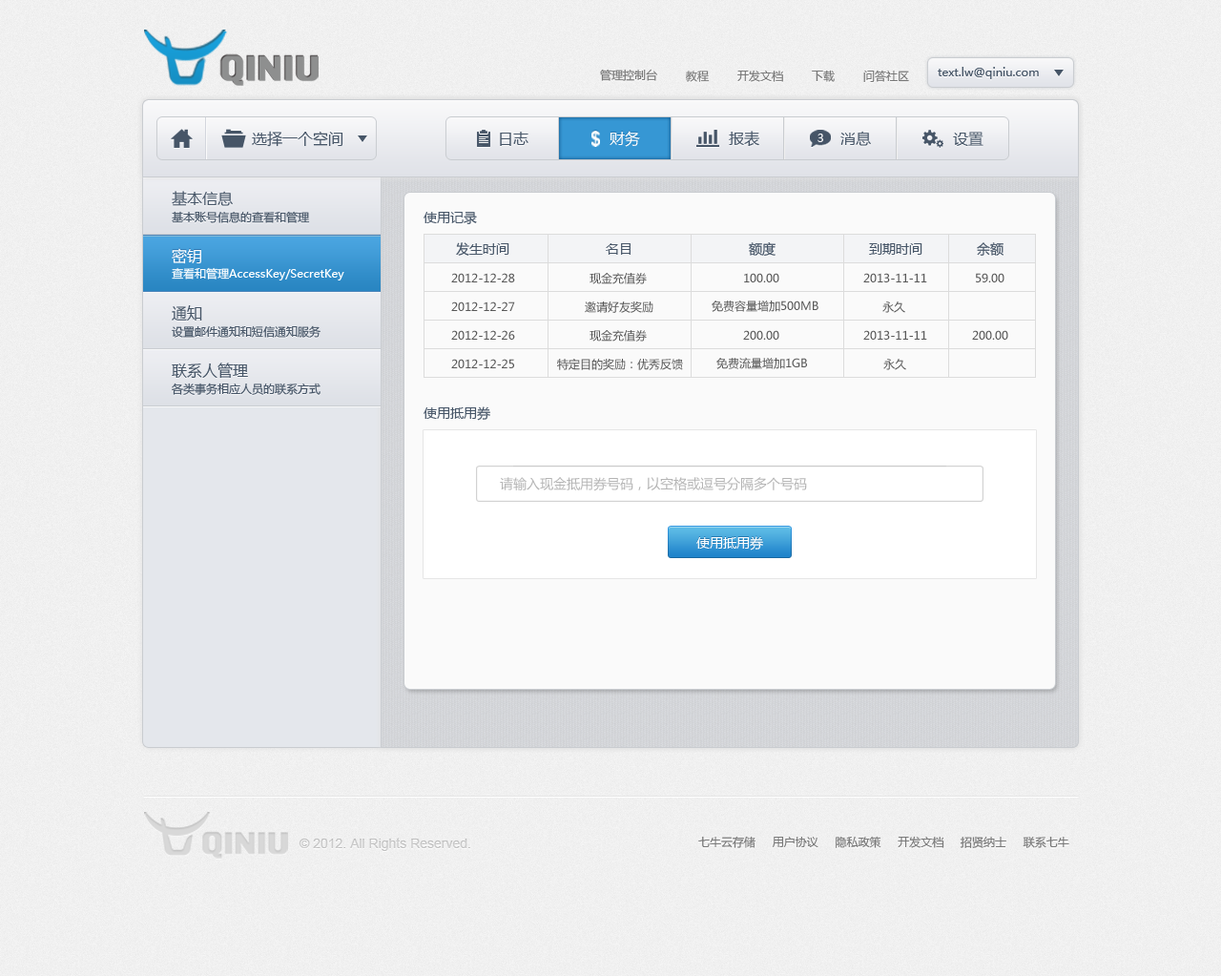
<style>
.page{position:relative;width:1221px;height:976px}
.page>*{position:absolute;margin:0}
.t1{font:11.5px "MicrosoftYaHei";color:#787878}
.t2{font:11.5px "MicrosoftYaHei";color:#465567}
.t3{font:15.3px "MicrosoftYaHei";color:#465567}
.t4{font:15.3px "MicrosoftYaHei";color:#ffffff}
.t5{font:11.5px "MicrosoftYaHei";color:#f8f8f9}
.t6{font:13.4px "MicrosoftYaHei";color:#465567}
.t7{font:11.5px "MicrosoftYaHei";color:#ffffff}
.t8{font:11.5px "MicrosoftYaHei";color:#585858}
.t9{font:13.4px "MicrosoftYaHei";color:#b4b4b4}
.t10{font:13.4px "MicrosoftYaHei";color:#ffffff}
.t11{font:13.4px "ArialMT";color:#c6c6c6}
</style>
<div class="page">
<p class="t1" style="left:600px;top:69px;width:57px;height:12px">管理控制台</p>
<p class="t1" style="left:686px;top:71px;width:24px;height:11px">教程</p>
<p class="t1" style="left:738px;top:70px;width:45px;height:12px">开发文档</p>
<p class="t1" style="left:812px;top:70px;width:23px;height:12px">下载</p>
<p class="t1" style="left:864px;top:70px;width:45px;height:12px">问答社区</p>
<p class="t2" style="left:938px;top:67px;width:101px;height:12px">text.lw@qiniu.com</p>
<p class="t3" style="left:252px;top:131px;width:92px;height:16px">选择一个空间</p>
<p class="t3" style="left:500px;top:132px;width:29px;height:14px">日志</p>
<p class="t4" style="left:610px;top:131px;width:30px;height:16px">财务</p>
<p class="t3" style="left:729px;top:131px;width:31px;height:16px">报表</p>
<p class="t5" style="left:818px;top:134px;width:6px;height:8px">3</p>
<p class="t3" style="left:841px;top:131px;width:30px;height:15px">消息</p>
<p class="t3" style="left:953px;top:132px;width:31px;height:14px">设置</p>
<p class="t3" style="left:172px;top:191px;width:61px;height:15px">基本信息</p>
<p class="t2" style="left:172px;top:211px;width:138px;height:12px">基本账号信息的查看和管理</p>
<p class="t6" style="left:424px;top:212px;width:53px;height:12px">使用记录</p>
<p class="t6" style="left:456px;top:242px;width:54px;height:14px">发生时间</p>
<p class="t6" style="left:606px;top:243px;width:25px;height:12px">名目</p>
<p class="t6" style="left:749px;top:242px;width:27px;height:15px">额度</p>
<p class="t6" style="left:869px;top:243px;width:54px;height:12px">到期时间</p>
<p class="t6" style="left:977px;top:242px;width:27px;height:14px">余额</p>
<p class="t4" style="left:172px;top:248px;width:29px;height:16px">密钥</p>
<p class="t7" style="left:172px;top:267px;width:172px;height:14px">查看和管理AccessKey/SecretKey</p>
<p class="t8" style="left:451px;top:273px;width:64px;height:9px">2012-12-28</p>
<p class="t8" style="left:590px;top:273px;width:57px;height:11px">现金充值券</p>
<p class="t8" style="left:744px;top:273px;width:36px;height:9px">100.00</p>
<p class="t8" style="left:864px;top:273px;width:64px;height:9px">2013-11-11</p>
<p class="t8" style="left:976px;top:273px;width:29px;height:9px">59.00</p>
<p class="t3" style="left:172px;top:305px;width:30px;height:16px">通知</p>
<p class="t8" style="left:451px;top:302px;width:64px;height:9px">2012-12-27</p>
<p class="t8" style="left:585px;top:302px;width:69px;height:11px">邀请好友奖励</p>
<p class="t8" style="left:712px;top:301px;width:107px;height:11px">免费容量增加500MB</p>
<p class="t8" style="left:883px;top:302px;width:23px;height:11px">永久</p>
<p class="t2" style="left:172px;top:325px;width:149px;height:13px">设置邮件通知和短信通知服务</p>
<p class="t8" style="left:451px;top:330px;width:64px;height:10px">2012-12-26</p>
<p class="t8" style="left:590px;top:330px;width:57px;height:12px">现金充值券</p>
<p class="t8" style="left:743px;top:330px;width:37px;height:10px">200.00</p>
<p class="t8" style="left:864px;top:330px;width:64px;height:10px">2013-11-11</p>
<p class="t8" style="left:972px;top:330px;width:37px;height:10px">200.00</p>
<p class="t3" style="left:172px;top:363px;width:76px;height:16px">联系人管理</p>
<p class="t8" style="left:451px;top:359px;width:63px;height:9px">2012-12-25</p>
<p class="t8" style="left:557px;top:359px;width:126px;height:11px">特定目的奖励：优秀反馈</p>
<p class="t8" style="left:717px;top:357px;width:90px;height:12px">免费流量增加1GB</p>
<p class="t8" style="left:884px;top:359px;width:23px;height:11px">永久</p>
<p class="t2" style="left:172px;top:383px;width:149px;height:12px">各类事务相应人员的联系方式</p>
<p class="t6" style="left:424px;top:407px;width:66px;height:14px">使用抵用券</p>
<p class="t9" style="left:500px;top:477px;width:307px;height:14px">请输入现金抵用券号码，以空格或逗号分隔多个号码</p>
<p class="t10" style="left:697px;top:536px;width:66px;height:15px">使用抵用券</p>
<p class="t11" style="left:299px;top:838px;width:171px;height:13px">© 2012. All Rights Reserved.</p>
<p class="t1" style="left:699px;top:836px;width:371px;height:12px">七牛云存储     用户协议     隐私政策     开发文档     招贤纳士     联系七牛</p>
</div>
